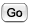
<style>
.page{position:relative;width:30px;height:25px;background:#ffffff}
.page>*{position:absolute;margin:0}
.t1{font:12px "ArialMT";color:#000000}
</style>
<div class="page">
<p class="t1" style="left:7px;top:8px;width:16px;height:9px">Go</p>
</div>
